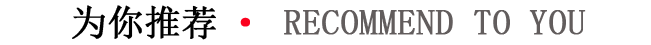
<style>
.page{position:relative;width:651px;height:45px;background:#ffffff}
.page>*{position:absolute;margin:0}
.t1{font:36px "SimSun";color:#625d5d;font-weight:bold}
.t2{font:36px "SimSun";color:#000000;font-weight:bold}
.t3{font:36px "SimSun";color:#fb011e;font-weight:bold}
</style>
<div class="page">
<p class="t1" style="left:72px;top:5px;width:514px;height:35px"><span class="t2">为你推荐</span><span class="t3">· </span>RECOMMEND TO YOU</p>
</div>
